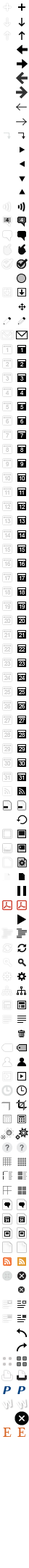
<style>
.page{position:relative;width:29px;height:1568px;background:#ffffff}
.page>*{position:absolute;margin:0}
.t1{font:13.6px "Baskerville";color:#d86625;text-transform:uppercase}
</style>
<div class="page">
<p class="t1" style="left:3px;top:1428px;width:8px;height:9px">E</p>
<p class="t1" style="left:17px;top:1428px;width:9px;height:9px">E</p>
</div>
